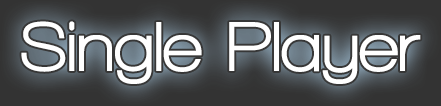
<style>
.page{position:relative;width:441px;height:106px}
.page>*{position:absolute;margin:0}
.t1{font:72px "WalkwayUltraBold";color:#ffffff}
</style>
<div class="page">
<p class="t1" style="left:21px;top:21px;width:400px;height:63px">Single Player</p>
</div>
